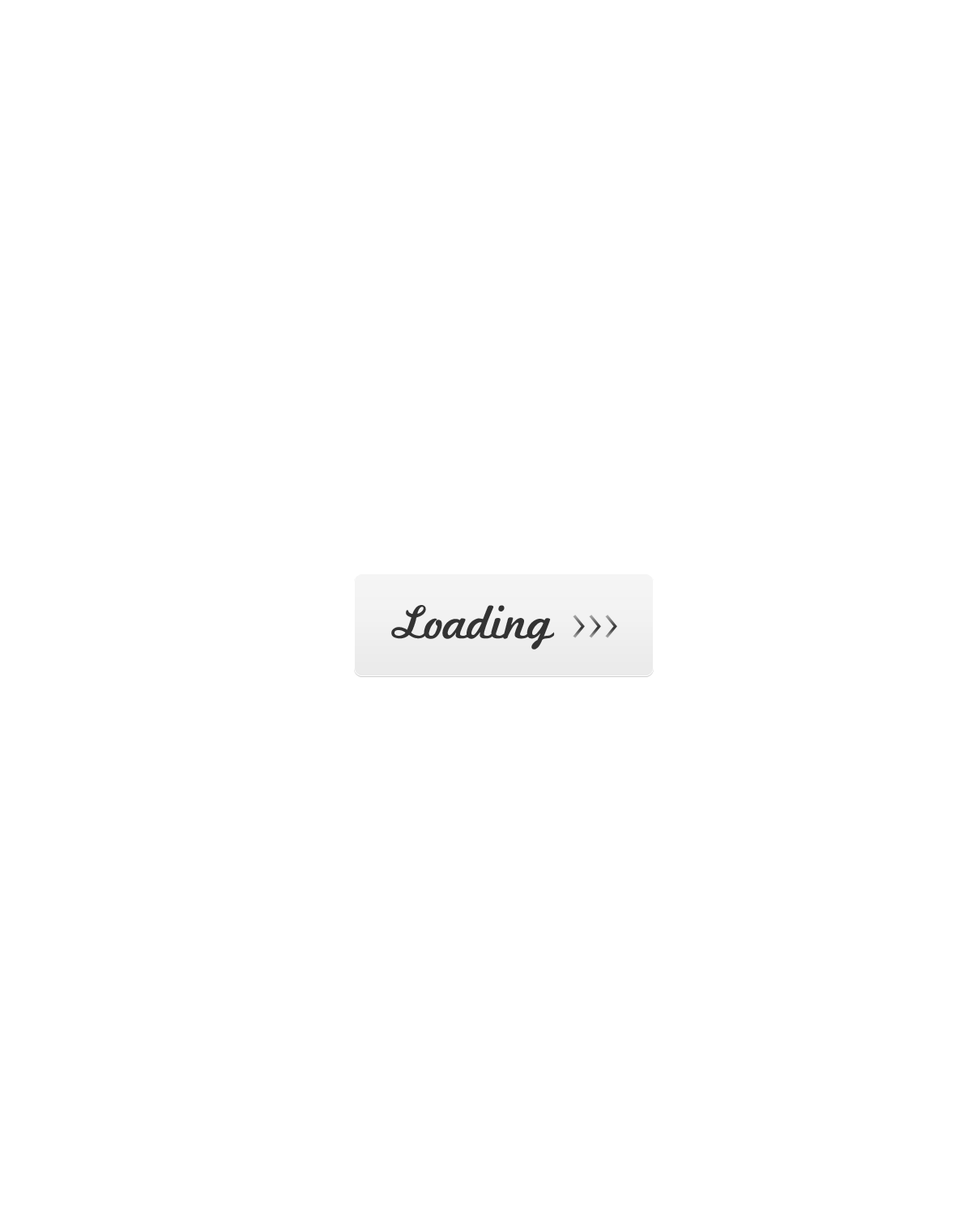
<style>
.page{position:relative;width:972px;height:1227px;background:#ffffff}
.page>*{position:absolute;margin:0}
.t1{font:49.4px "MarketingScript";letter-spacing:-0.02em;color:#333333}
</style>
<div class="page">
<p class="t1" style="left:391px;top:605px;width:164px;height:45px">Loading</p>
</div>
